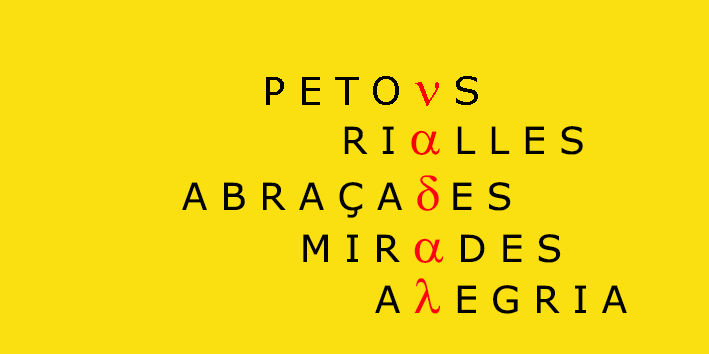
<style>
.page{position:relative;width:709px;height:354px;background:#fbe011}
.page>*{position:absolute;margin:0}
.t1{font:37.5px "Verdana";color:#000000}
.t2{font:50px "SymbolMT";color:#fb0500}
.t3{font:50px "SymbolMT";color:#fa0100}
.t4{font:50px "SymbolMT";color:#ff0111}
</style>
<div class="page">
<p class="t1" style="left:266px;top:76px;width:212px;height:30px">P E T O <span class="t2">n</span> S</p>
<p class="t1" style="left:344px;top:126px;width:239px;height:29px">R I <span class="t3">a</span> L L E S</p>
<p class="t1" style="left:182px;top:175px;width:329px;height:43px">A B R A Ç A <span class="t4">d </span>E S</p>
<p class="t1" style="left:303px;top:234px;width:258px;height:29px">M I R <span class="t4">a</span> D E S</p>
<p class="t1" style="left:375px;top:278px;width:252px;height:36px">A <span class="t4">l</span> E G R I A</p>
</div>
